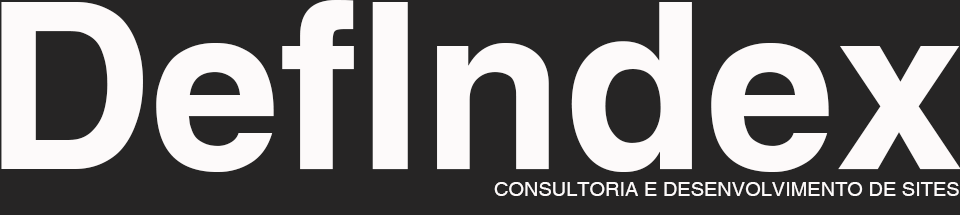
<style>
.page{position:relative;width:960px;height:215px;background:#262525}
.page>*{position:absolute;margin:0}
.t1{font:232px "HelveticaLTStd-Bold";color:#fdfafa}
.t2{font:20px "HelveticaLTStd-Roman";color:#fdfafa}
</style>
<div class="page">
<p class="t1" style="left:1px;top:0px;width:960px;height:172px">DefIndex</p>
<p class="t2" style="left:494px;top:182px;width:465px;height:14px">CONSULTORIA E DESENVOLVIMENTO DE SITES</p>
</div>
